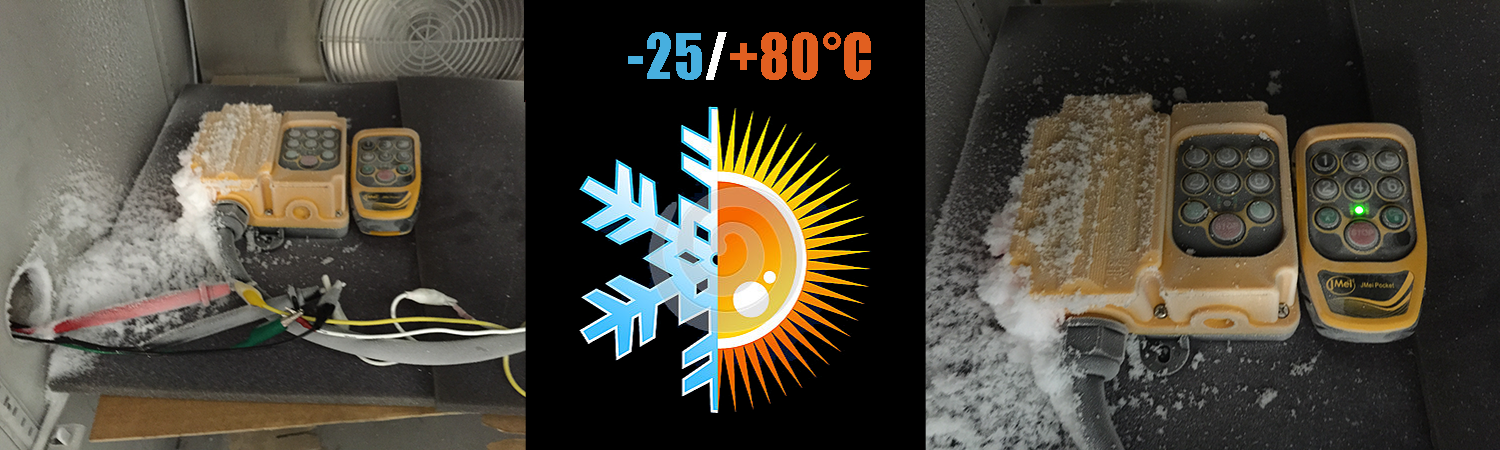
<style>
.page{position:relative;width:1500px;height:450px}
.page>*{position:absolute;margin:0}
.t1{font:58.3px "Impact";color:#e15f20}
.t2{font:58.3px "Impact";color:#47afdf}
.t3{font:58.3px "Impact";color:#fdfcfb}
</style>
<div class="page">
<p class="t1" style="left:628px;top:32px;width:243px;height:48px"><span class="t2">-25</span><span class="t3">/</span>+80°C</p>
</div>
